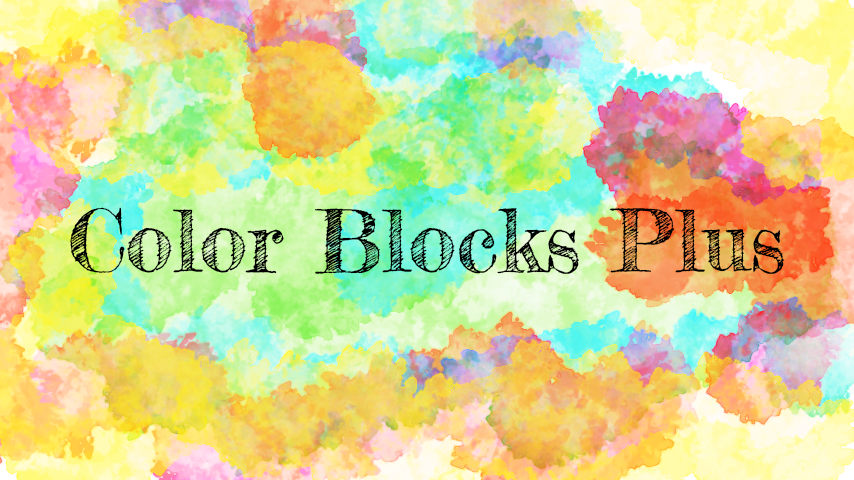
<style>
.page{position:relative;width:854px;height:480px}
.page>*{position:absolute;margin:0}
.t1{font:86px "FrederickatheGreat-Regular";color:#000000}
</style>
<div class="page">
<p class="t1" style="left:70px;top:207px;width:714px;height:67px">Color Blocks Plus</p>
</div>
